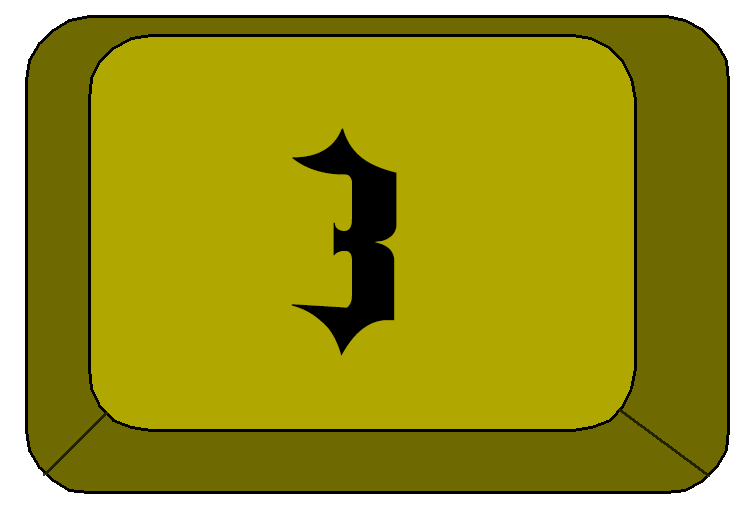
<style>
.page{position:relative;width:740px;height:508px;background:#b0a800}
.page>*{position:absolute;margin:0}
.t1{font:288px "NightmareHero";color:#010000}
</style>
<div class="page">
<p class="t1" style="left:291px;top:128px;width:106px;height:228px">3</p>
</div>
